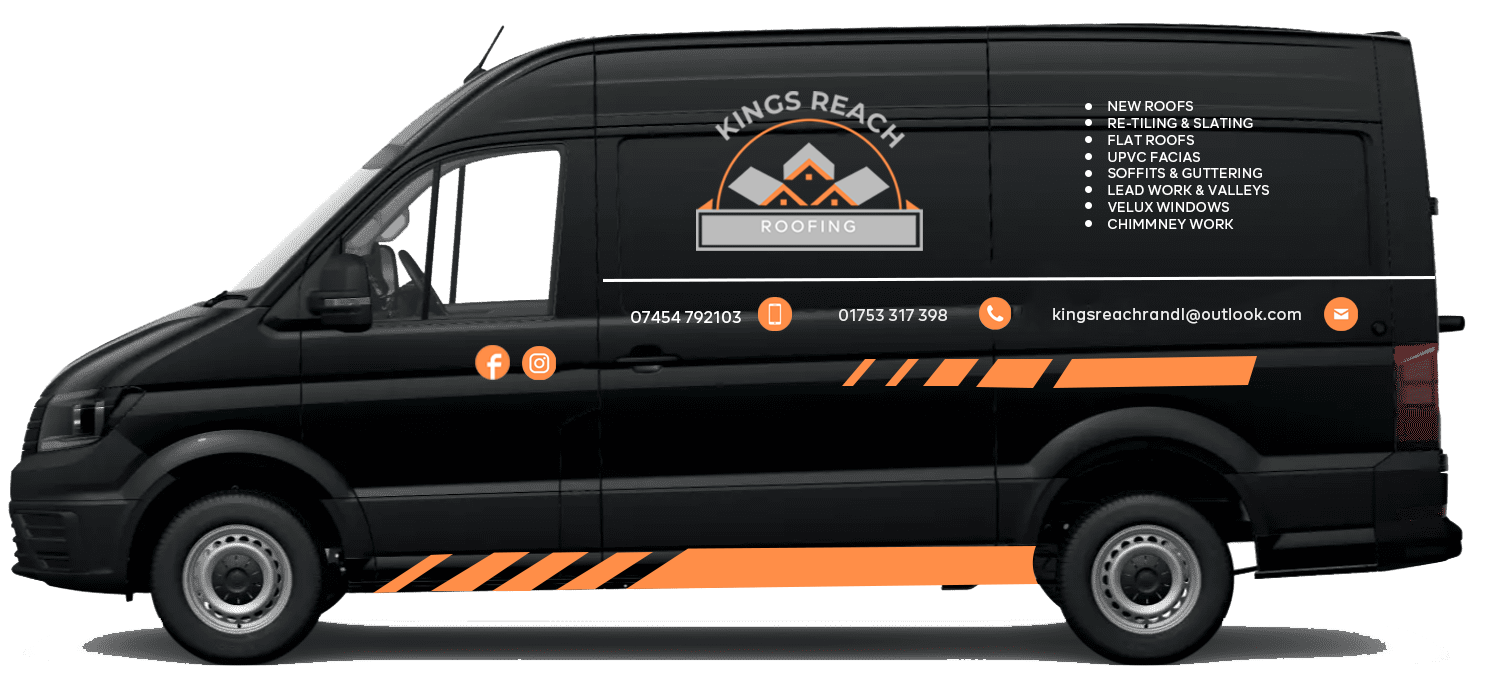
<style>
.page{position:relative;width:1488px;height:682px;background:#ffffff}
.page>*{position:absolute;margin:0}
.t1{font:13.2px/17px "BRFirma-Medium";letter-spacing:0.02em;color:#ffffff}
.t2{font:16px "BRFirma-Medium";letter-spacing:0.02em;color:#ffffff}
</style>
<div class="page">
<p class="t1" style="left:1108px;top:101px;width:161px;height:128px">NEW ROOFS<br>RE-TILING &amp; SLATING<br>FLAT ROOFS<br>UPVC FACIAS<br>SOFFITS &amp; GUTTERING<br>LEAD WORK &amp; VALLEYS<br>VELUX WINDOWS<br>CHIMMNEY WORK</p>
<p class="t2" style="left:631px;top:311px;width:110px;height:12px">07454 792103</p>
<p class="t2" style="left:839px;top:309px;width:108px;height:12px;opacity:0.89">01753 317 398</p>
<p class="t2" style="left:1053px;top:308px;width:248px;height:16px;opacity:0.89">kingsreachrandl@outlook.com</p>
</div>
